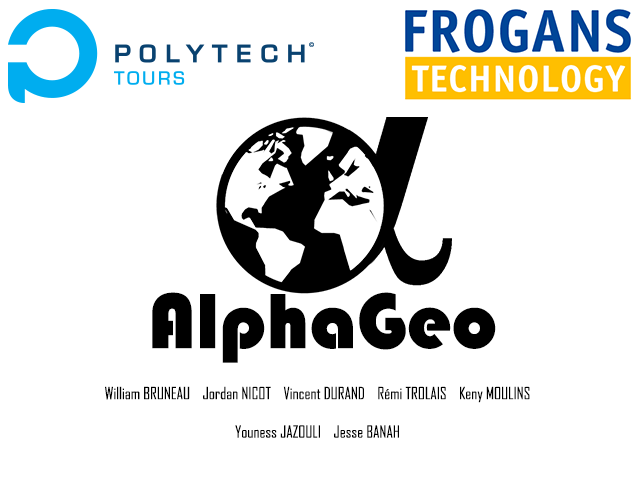
<style>
.page{position:relative;width:640px;height:480px;background:#ffffff}
.page>*{position:absolute;margin:0}
.t1{font:81px "Bauhaus93";color:#000000}
.t2{font:16px "AgencyFB-Reg";color:#000000}
</style>
<div class="page">
<p class="t1" style="left:152px;top:292px;width:344px;height:71px">AlphaGeo</p>
<p class="t2" style="left:105px;top:386px;width:425px;height:52px;text-align:center">William BRUNEAU    Jordan NICOT    Vincent DURAND    Rémi TROLAIS    Keny MOULINS    <br><br>Youness JAZOULI    Jesse BANAH</p>
</div>
